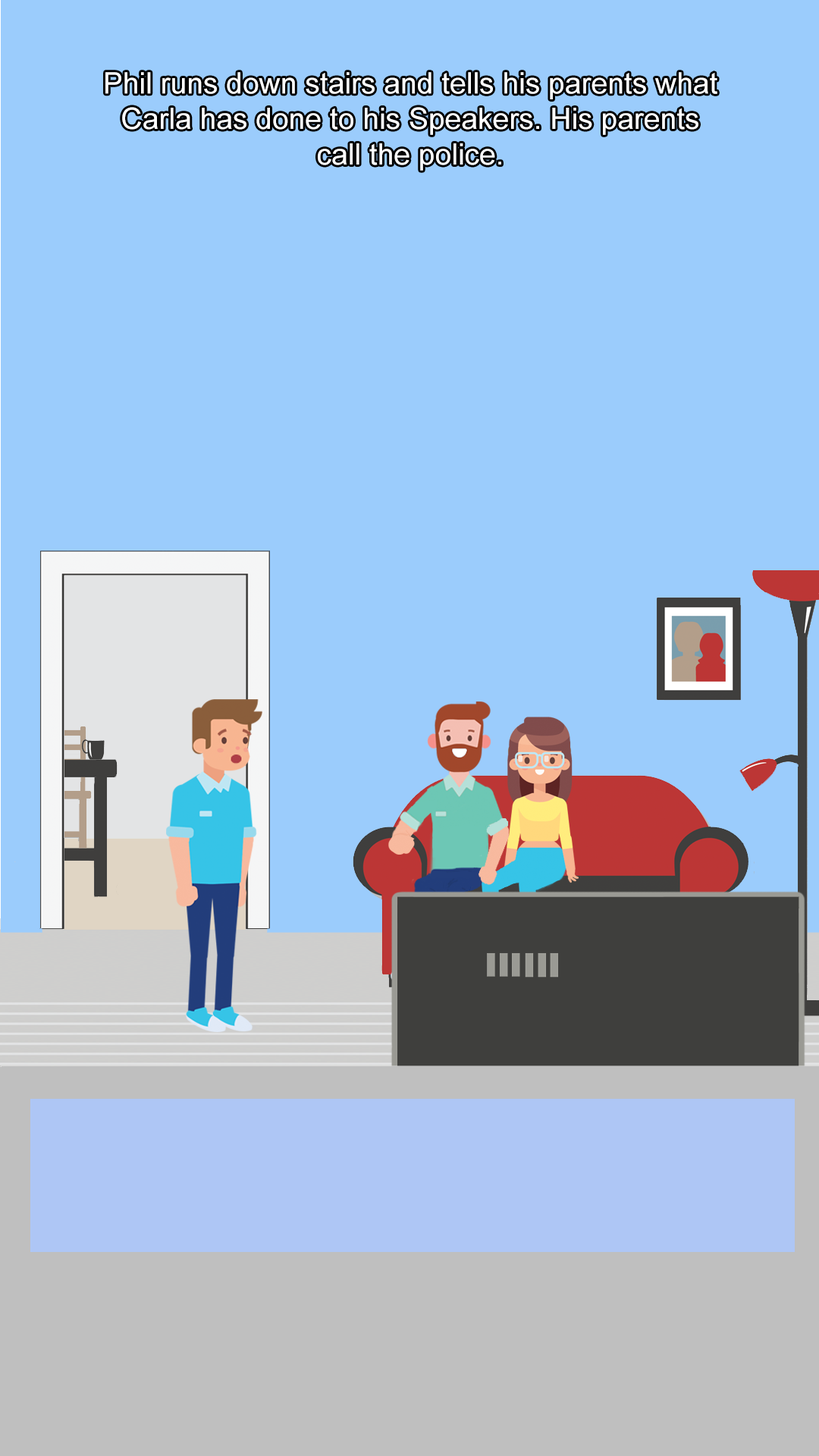
<style>
.page{position:relative;width:819px;height:1456px;background:#9bccfc}
.page>*{position:absolute;margin:0}
.t1{font:29.6px "ArialMT";color:#ffffff}
</style>
<div class="page">
<p class="t1" style="left:105px;top:72px;width:612px;height:99px;text-align:center">Phil runs down stairs and tells his parents what Carla has done to his Speakers. His parents call the police.</p>
</div>
